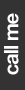
<style>
.page{position:relative;width:25px;height:90px;background:#333333}
.page>*{position:absolute;margin:0}
.t1{font:20px "HelveticaNeue-Bold";letter-spacing:-0.05em;color:#ffffff}
</style>
<div class="page">
<p class="t1" style="left:4px;top:13px;width:15px;height:62px;rotate:-90deg">call me</p>
</div>
